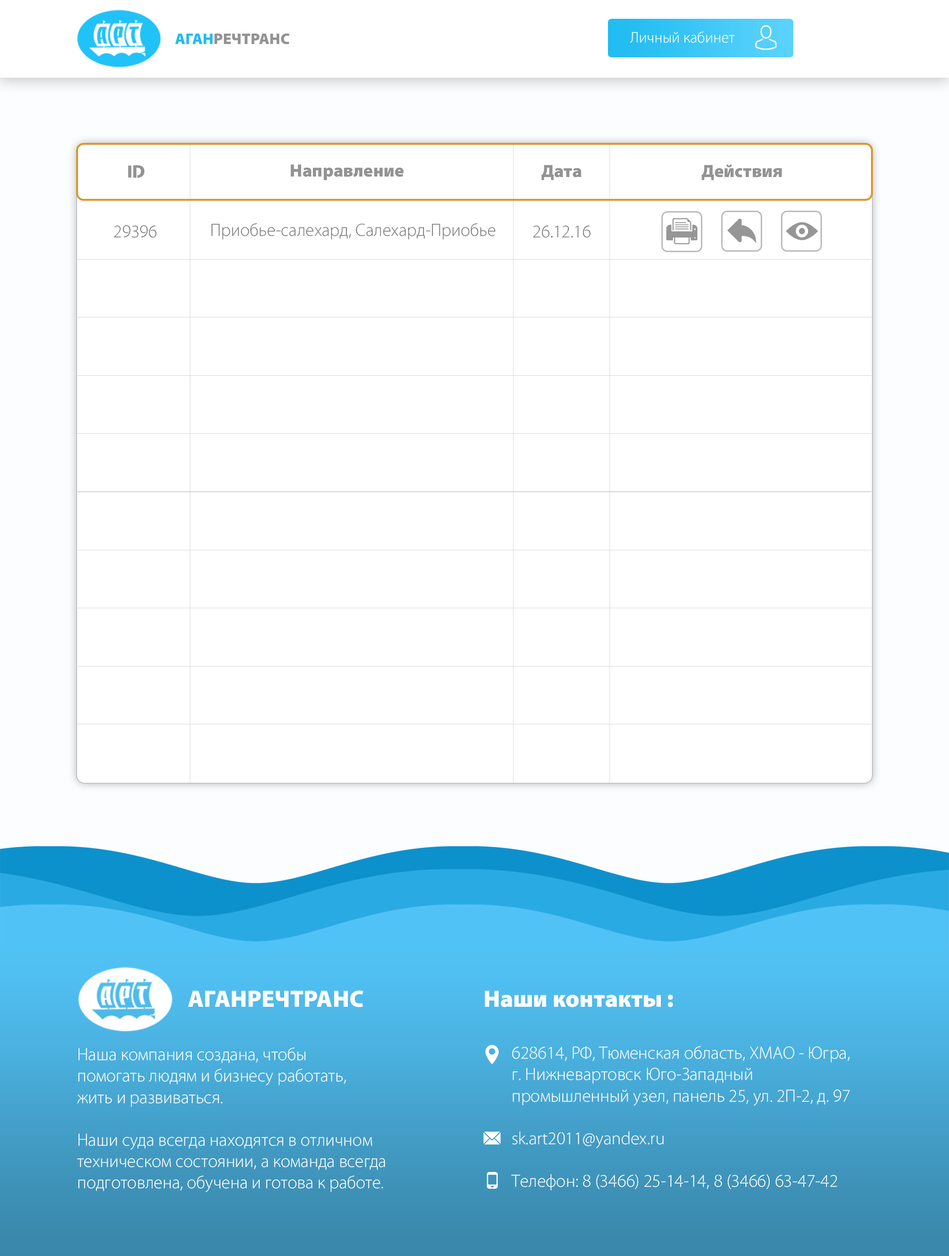
<style>
.page{position:relative;width:949px;height:1256px;background:#ffffff}
.page>*{position:absolute;margin:0}
.t1{font:15.5px "Cleanvertising-Black";color:#949393}
.t2{font:15.5px "Cleanvertising-Black";color:#20bcf1}
.t3{font:15.5px "Cleanvertising-Light";color:#ffffff}
.t4{font:17.8px "Cleanvertising-Black";color:#949393}
.t5{font:17.8px "Cleanvertising-Light";color:#787878}
.t6{font:23.7px "Cleanvertising-Black";color:#fefefe}
.t7{font:23.7px "Cleanvertising-Black";color:#ffffff}
.t8{font:17.8px "Cleanvertising-Light";color:#ffffff}
</style>
<div class="page">
<p class="t1" style="left:175px;top:33px;width:115px;height:12px"><span class="t2">АГАН</span>РЕЧТРАНС</p>
<p class="t3" style="left:630px;top:31px;width:105px;height:12px">Личный кабинет</p>
<p class="t4" style="left:128px;top:165px;width:17px;height:13px">ID</p>
<p class="t4" style="left:291px;top:164px;width:113px;height:16px">Направление</p>
<p class="t4" style="left:541px;top:165px;width:41px;height:15px">Дата</p>
<p class="t4" style="left:702px;top:165px;width:80px;height:15px">Действия</p>
<p class="t5" style="left:114px;top:225px;width:43px;height:13px">29396</p>
<p class="t5" style="left:211px;top:223px;width:285px;height:17px">Приобье-салехард, Салехард-Приобье</p>
<p class="t5" style="left:533px;top:225px;width:58px;height:13px">26.12.16</p>
<p class="t6" style="left:188px;top:990px;width:175px;height:17px">АГАНРЕЧТРАНС</p>
<p class="t7" style="left:485px;top:990px;width:188px;height:17px">Наши контакты :</p>
<p class="t8" style="left:77px;top:1047px;width:308px;height:145px">Наша компания создана, чтобы<br>помогать людям и бизнесу работать,<br>жить и развиваться.<br><br>Наши суда всегда находятся в отличном<br>техническом состоянии, а команда всегда<br>подготовлена, обучена и готова к работе.</p>
<p class="t8" style="left:511px;top:1046px;width:340px;height:145px">628614, РФ, Тюменская область, ХМАО - Югра,<br>г. Нижневартовск Юго-Западный <br>промышленный узел, панель 25, ул. 2П-2, д. 97<br><br>sk.art2011@yandex.ru<br><br>Телефон: 8 (3466) 25-14-14, 8 (3466) 63-47-42</p>
</div>
